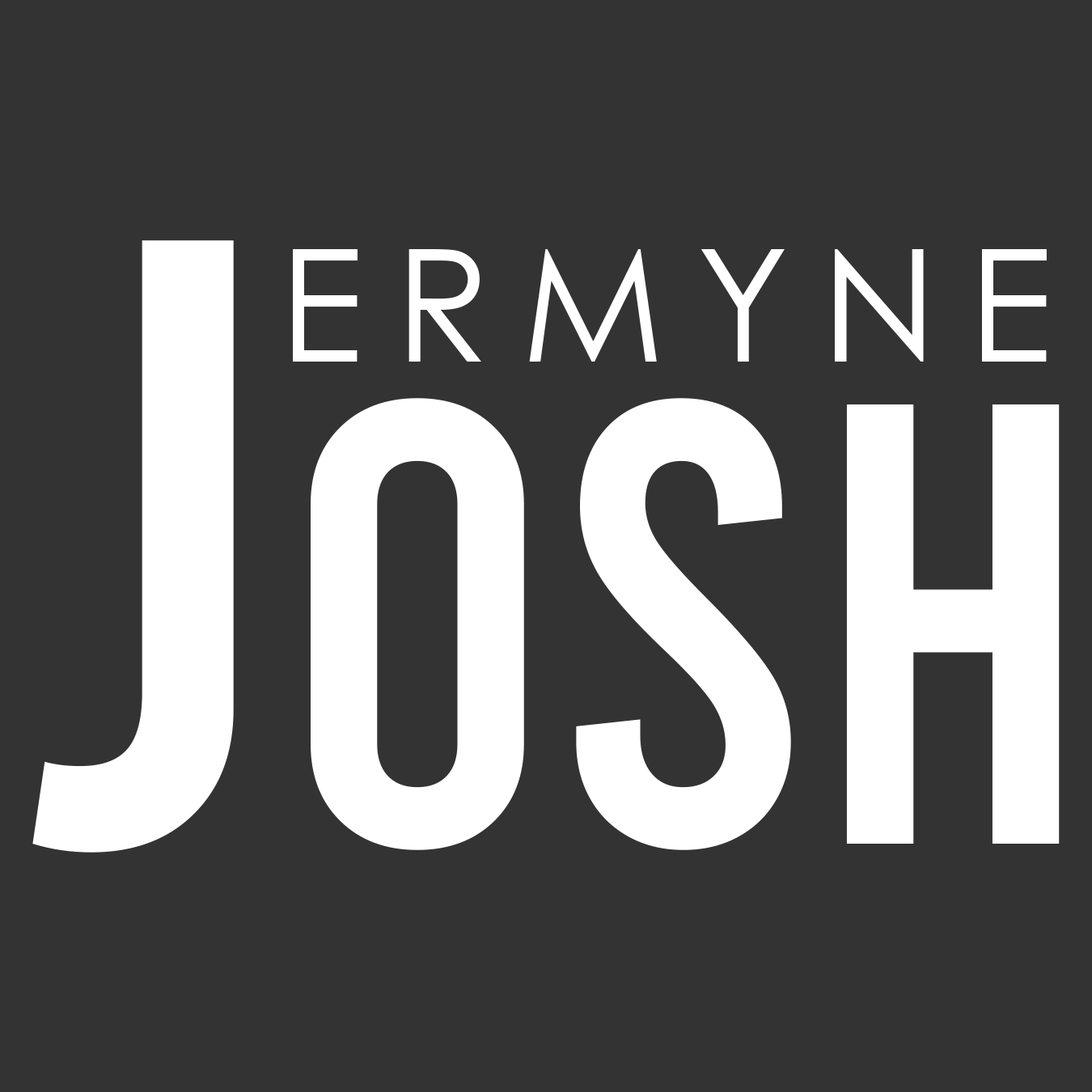
<style>
.page{position:relative;width:1092px;height:1092px;background:#333333}
.page>*{position:absolute;margin:0}
.t1{font:627.4px "Bebas-Regular";color:#ffffff}
.t2{font:861.7px "Bebas-Regular";color:#ffffff}
.t3{font:156.9px "CenturyGothic";letter-spacing:0.2em;color:#ffffff}
</style>
<div class="page">
<p class="t1" style="left:32px;top:240px;width:1028px;height:613px"><span class="t2">J</span>osh</p>
<p class="t3" style="left:293px;top:249px;width:754px;height:113px">ERMYNE</p>
</div>
